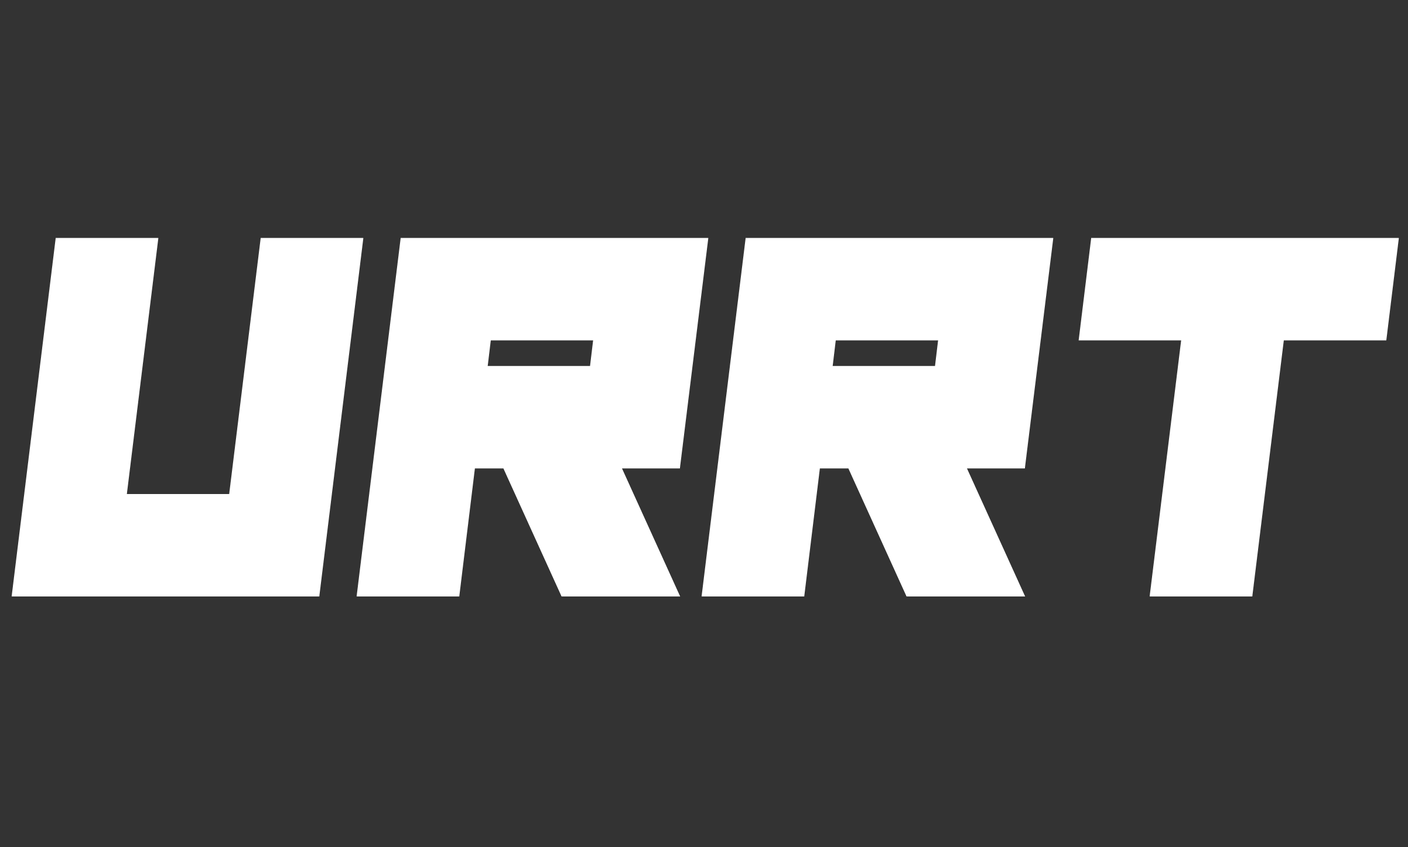
<style>
.page{position:relative;width:1408px;height:847px;background:#333333}
.page>*{position:absolute;margin:0}
.t1{font:524.6px "NauSea";letter-spacing:0.02em;color:#ffffff}
</style>
<div class="page">
<p class="t1" style="left:12px;top:238px;width:1387px;height:359px">URRT</p>
</div>
